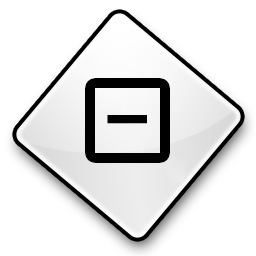
<style>
.page{position:relative;width:256px;height:256px;background:#ffffff}
.page>*{position:absolute;margin:0}
.t1{font:82.5px "MyriadPro-Bold";letter-spacing:0.005em;color:#020202;scale:1.83 1}
</style>
<div class="page">
<p class="t1" style="left:107px;top:115px;width:40px;height:9px">-</p>
</div>
